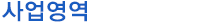
<style>
.page{position:relative;width:198px;height:22px;background:#ffffff}
.page>*{position:absolute;margin:0}
.t1{font:23px "YDIYGO130-KSCpc-EUC-H";letter-spacing:-0.05em;color:#195cc0}
</style>
<div class="page">
<p class="t1" style="left:2px;top:1px;width:85px;height:21px">사업영역</p>
</div>
